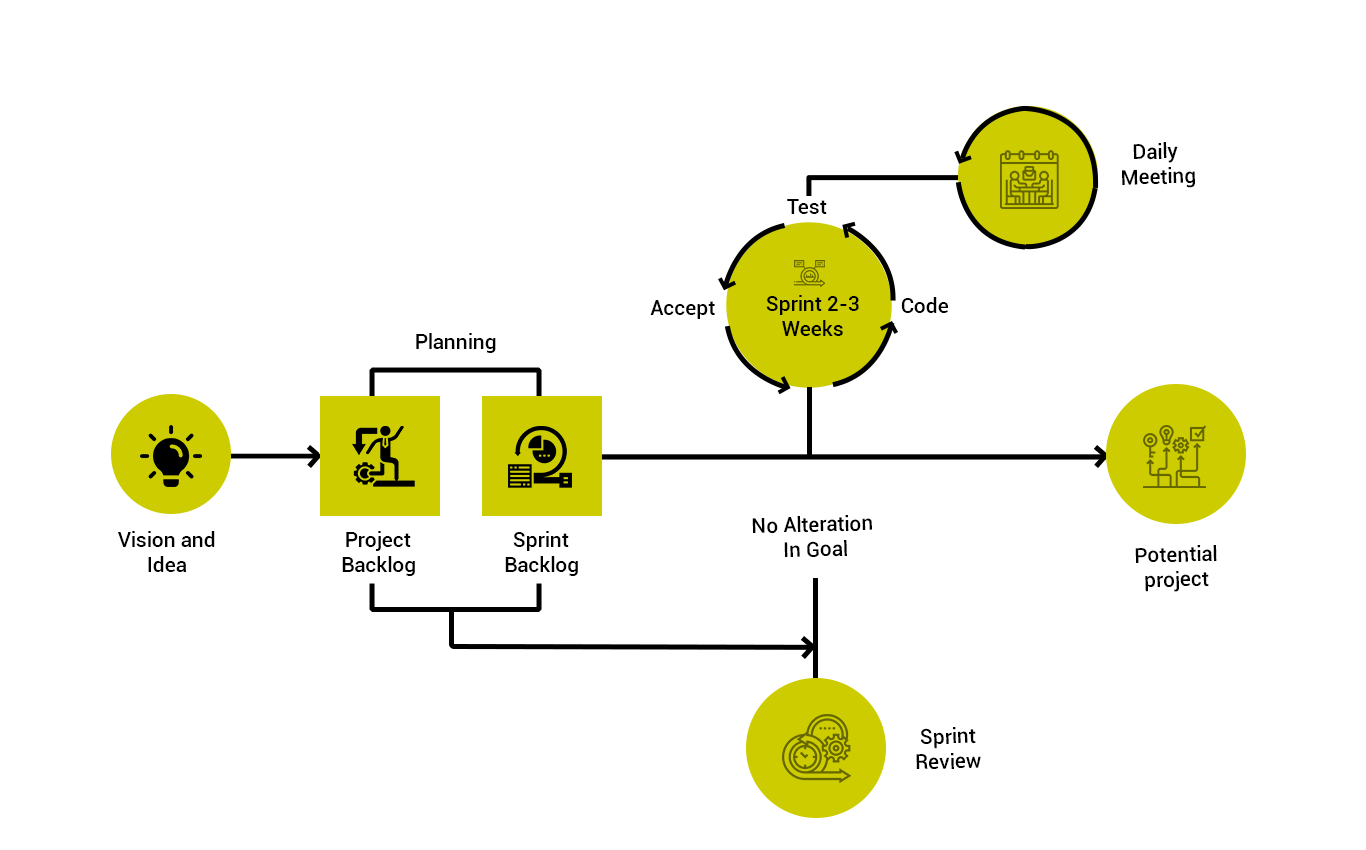
<style>
.page{position:relative;width:1366px;height:850px;background:#ffffff}
.page>*{position:absolute;margin:0}
.t1{font:20.8px/25px "Roboto-Medium";color:#000000}
.t2{font:20.8px "Roboto-Medium";color:#000000}
</style>
<div class="page">
<p class="t1" style="left:1122px;top:142px;width:73px;height:46px;text-align:center;rotate:-1deg">Daily <br>Meeting</p>
<p class="t2" style="left:787px;top:199px;width:40px;height:15px">Test</p>
<p class="t2" style="left:650px;top:300px;width:65px;height:19px">Accept</p>
<p class="t1" style="left:766px;top:295px;width:93px;height:41px;text-align:center">Sprint 2-3<br>Weeks</p>
<p class="t2" style="left:901px;top:297px;width:47px;height:16px">Code</p>
<p class="t2" style="left:416px;top:333px;width:80px;height:20px">Planning</p>
<p class="t1" style="left:752px;top:515px;width:120px;height:42px;text-align:center;rotate:-1deg">No Alteration <br>In Goal</p>
<p class="t1" style="left:118px;top:531px;width:97px;height:41px;text-align:center">Vision and<br>Idea</p>
<p class="t1" style="left:342px;top:531px;width:73px;height:45px;text-align:center">Project<br>Backlog</p>
<p class="t1" style="left:505px;top:531px;width:73px;height:45px;text-align:center">Sprint<br>Backlog</p>
<p class="t1" style="left:1135px;top:545px;width:82px;height:47px;text-align:center;rotate:-1deg">Potential<br>project</p>
<p class="t1" style="left:916px;top:727px;width:65px;height:42px;text-align:center;rotate:-1deg">Sprint<br>Review</p>
</div>
